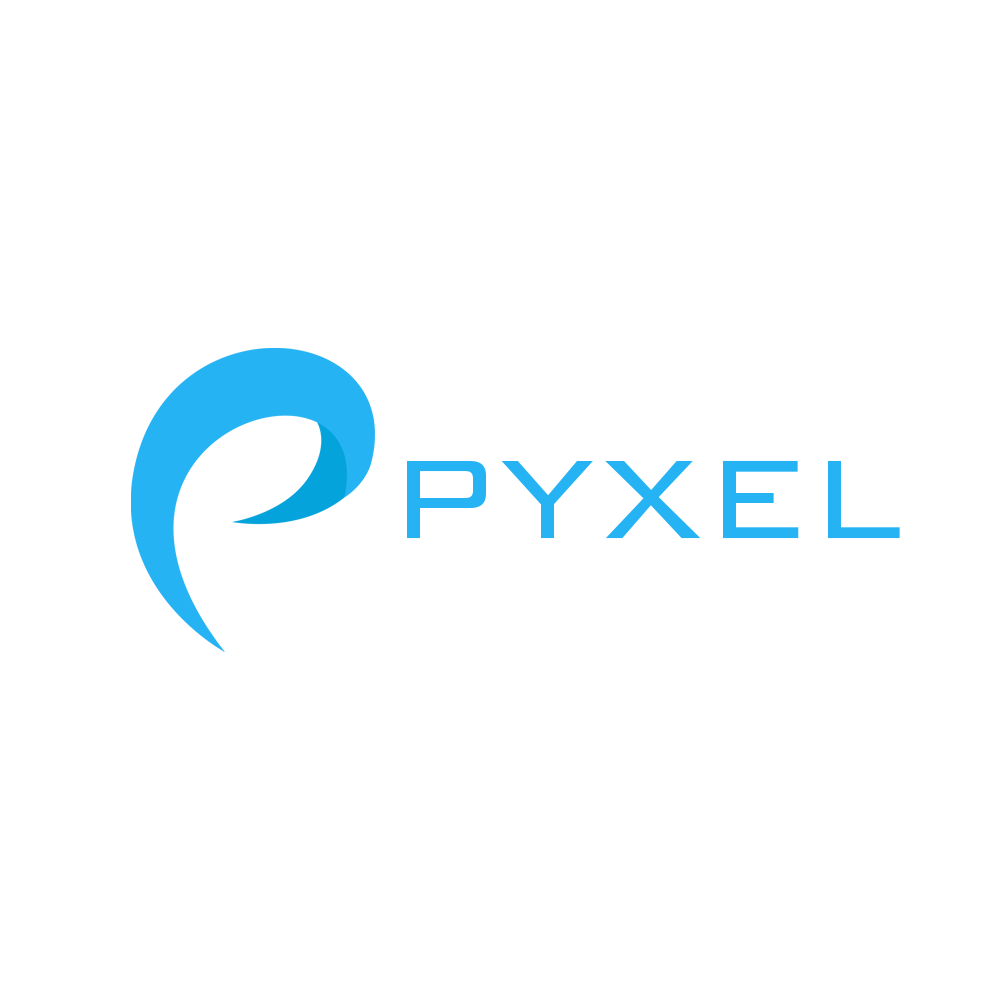
<style>
.page{position:relative;width:1000px;height:1000px;background:#ffffff}
.page>*{position:absolute;margin:0}
.t1{font:150px "BankGothicCLtBT-Light";letter-spacing:-0.005em;color:#26b3f3}
</style>
<div class="page">
<p class="t1" style="left:407px;top:460px;width:493px;height:79px">PYXEL</p>
</div>
